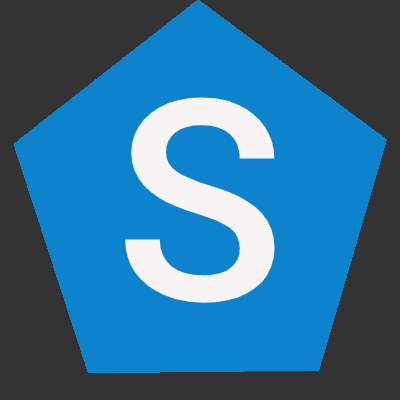
<style>
.page{position:relative;width:400px;height:400px;background:#0e83cd}
.page>*{position:absolute;margin:0}
.t1{font:281px "Roboto-Medium";color:#f9f4f4}
</style>
<div class="page">
<p class="t1" style="left:125px;top:97px;width:150px;height:206px">S</p>
</div>
